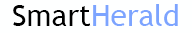
<style>
.page{position:relative;width:192px;height:33px;background:#feffff}
.page>*{position:absolute;margin:0}
.t1{font:30px "TrebuchetMS";color:#7ca4ff}
.t2{font:30px "TrebuchetMS";color:#000000}
</style>
<div class="page">
<p class="t1" style="left:13px;top:4px;width:165px;height:22px"><span class="t2">Smart</span>Herald</p>
</div>
